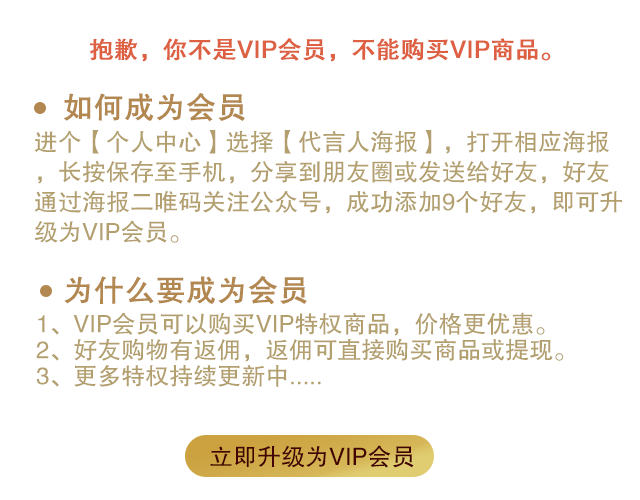
<style>
.page{position:relative;width:640px;height:500px;background:#ffffff}
.page>*{position:absolute;margin:0}
.t1{font:24px "FZHTJW--GB1-0";color:#dd6042;font-weight:bold}
.t2{font:30px "FZHTJW--GB1-0";color:#b28850;font-weight:bold}
.t3{font:24px/30px "FZHTJW--GB1-0";color:#b29f6d}
.t4{font:24px "FZHTJW--GB1-0";color:#420302}
</style>
<div class="page">
<p class="t1" style="left:90px;top:38px;width:461px;height:24px">抱歉，你不是VIP会员，不能购买VIP商品。</p>
<p class="t2" style="left:63px;top:93px;width:182px;height:29px">如何成为会员</p>
<p class="t3" style="left:34px;top:130px;width:588px;height:113px">进个【个人中心】选择【代言人海报】，打开相应海报，长按保存至手机，分享到朋友圈或发送给好友，好友通过海报二唯码关注公众号，成功添加9个好友，即可升级为VIP会员。</p>
<p class="t2" style="left:64px;top:276px;width:243px;height:29px">为什么要成为会员</p>
<p class="t3" style="left:36px;top:312px;width:528px;height:75px">1、VIP会员可以购买VIP特权商品，价格更优惠。<br>2、好友购物有返佣，返佣可直接购买商品或提现。<br>3、更多特权持续更新中.....</p>
<p class="t4" style="left:210px;top:445px;width:204px;height:23px">立即升级为VIP会员</p>
</div>
